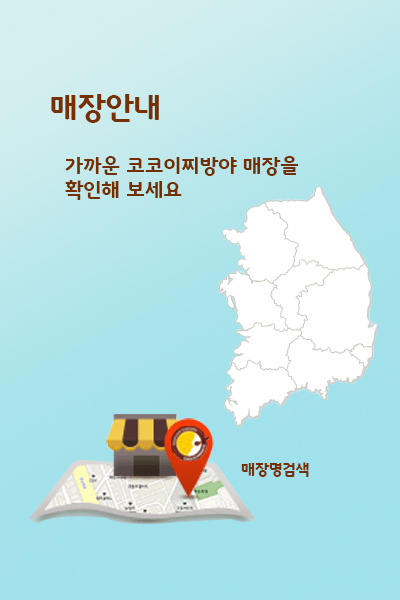
<style>
.page{position:relative;width:400px;height:600px}
.page>*{position:absolute;margin:0}
.t1{font:30px "GodoB";color:#773001}
.t2{font:20px "GodoB";color:#742f01}
.t3{font:15px "GodoB";color:#773001}
</style>
<div class="page">
<p class="t1" style="left:51px;top:94px;width:108px;height:29px">매장안내</p>
<p class="t2" style="left:65px;top:156px;width:234px;height:44px">가까운 코코이찌방야 매장을<br>확인해 보세요</p>
<p class="t3" style="left:241px;top:462px;width:68px;height:15px">매장명검색</p>
</div>
